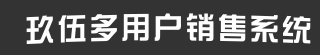
<style>
.page{position:relative;width:320px;height:55px;background:#333333}
.page>*{position:absolute;margin:0}
.t1{font:30px "HYk1gj";letter-spacing:0.075em;color:#fffefe;text-transform:uppercase}
</style>
<div class="page">
<p class="t1" style="left:26px;top:13px;width:285px;height:32px">玖伍多用户销售系统</p>
</div>
